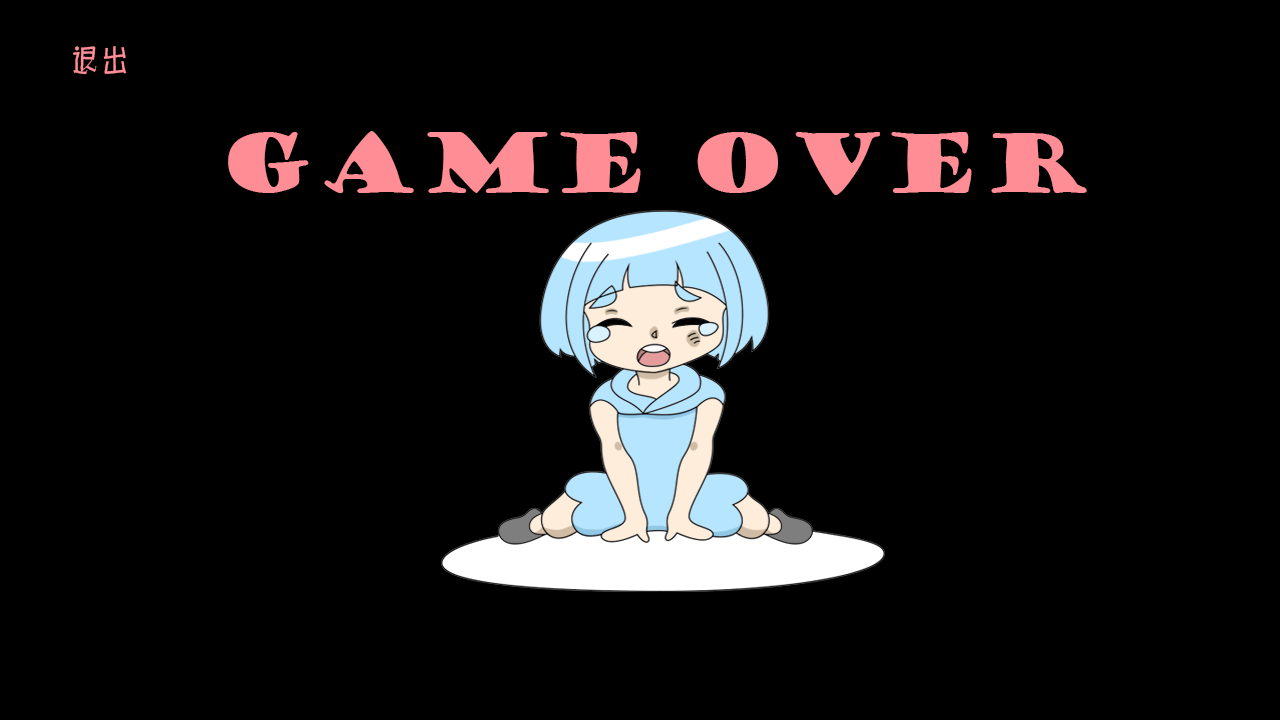
<style>
.page{position:relative;width:1280px;height:720px;background:#000000}
.page>*{position:absolute;margin:0}
.t1{font:30px "By-JOSSQ-DMF-in-BeiJing";color:#ff8d95}
.t2{font:80px "GoudyStout";color:#ff8d95}
</style>
<div class="page">
<p class="t1" style="left:73px;top:46px;width:54px;height:29px">退出</p>
<p class="t2" style="left:228px;top:131px;width:859px;height:64px">Game Over</p>
</div>
